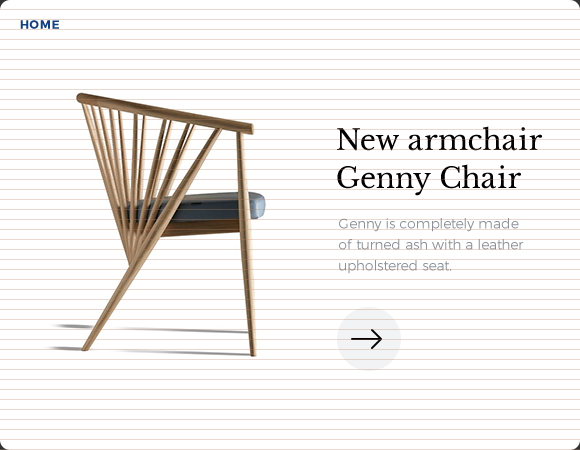
<style>
.page{position:relative;width:580px;height:450px;background:#ffffff}
.page>*{position:absolute;margin:0}
.t1{font:12px "Montserrat-Bold";letter-spacing:0.05em;color:#12407e;text-transform:uppercase}
.t2{font:28px/38px "LibreBaskerville-Regular";color:#000000}
.t3{font:14px/21px "Montserrat-Light";color:#8c9199}
</style>
<div class="page">
<p class="t1" style="left:20px;top:20px;width:39px;height:9px">Home</p>
<p class="t2" style="left:337px;top:126px;width:205px;height:70px">New armchair<br>Genny Chair</p>
<p class="t3" style="left:339px;top:218px;width:185px;height:56px">Genny is completely made <br>of turned ash with a leather upholstered seat.</p>
</div>
